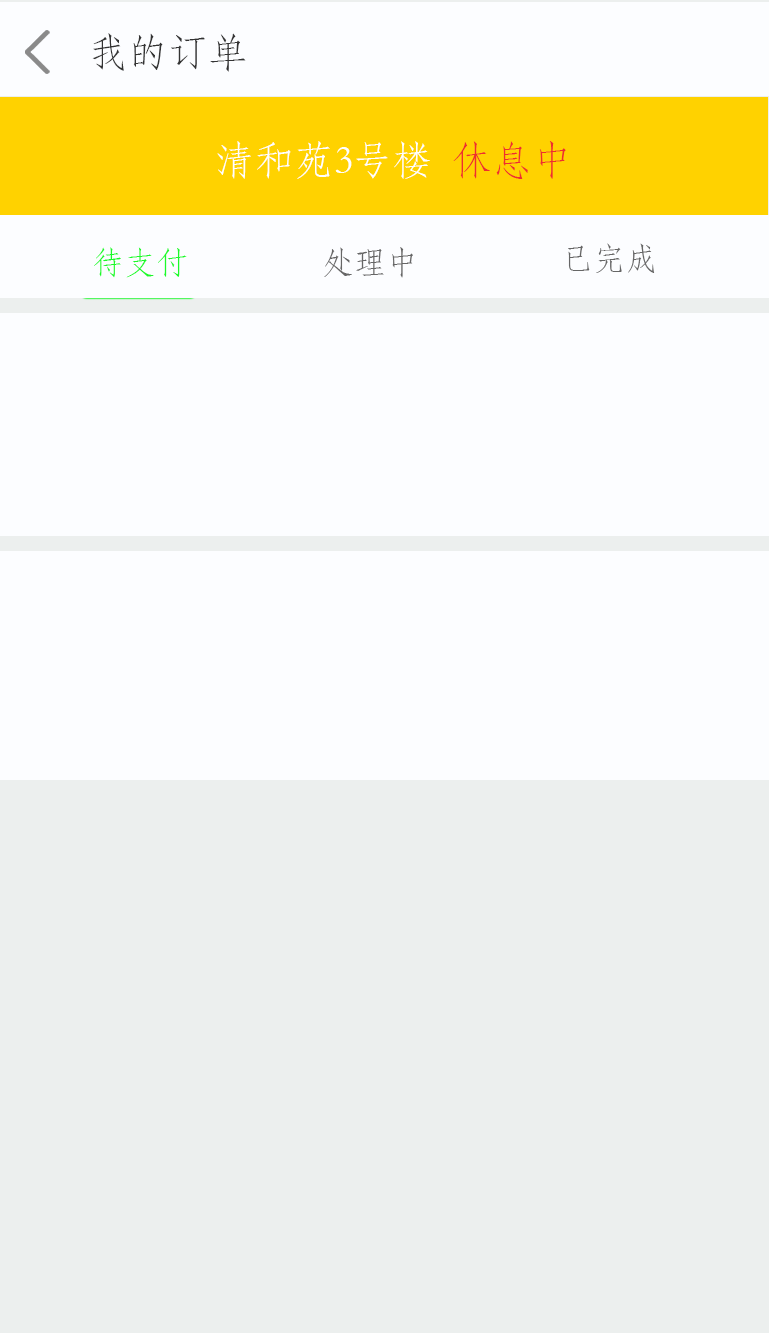
<style>
.page{position:relative;width:769px;height:1333px;background:#fcfdff}
.page>*{position:absolute;margin:0}
.t1{font:40px "STFangsong";color:#333333}
.t2{font:40px "STFangsong";color:#ffffff}
.t3{font:40px "STFangsong";color:#ef2e2e}
.t4{font:32px "STFangsong";color:#666666}
.t5{font:32px "STFangsong";color:#1afa29}
</style>
<div class="page">
<p class="t1" style="left:92px;top:33px;width:154px;height:39px">我的订单</p>
<p class="t2" style="left:217px;top:141px;width:349px;height:38px">清和苑3号楼  <span class="t3">休息中</span></p>
<p class="t4" style="left:568px;top:243px;width:87px;height:30px">已完成</p>
<p class="t5" style="left:94px;top:247px;width:93px;height:31px">待支付</p>
<p class="t4" style="left:324px;top:247px;width:89px;height:31px">处理中</p>
</div>
